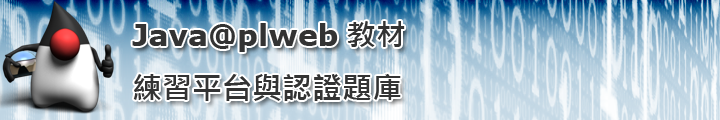
<style>
.page{position:relative;width:720px;height:120px}
.page>*{position:absolute;margin:0}
.t1{font:30px "MicrosoftJhengHeiBold";color:#333333}
.t2{font:30px "Verdana-Bold";color:#333333}
</style>
<div class="page">
<p class="t1" style="left:132px;top:21px;width:273px;height:80px"><span class="t2">Java@plweb</span> 教材<br>練習平台與認證題庫</p>
</div>
